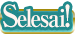
<style>
.page{position:relative;width:75px;height:34px;background:#218a8c}
.page>*{position:absolute;margin:0}
.t1{font:24px "RyuminPro-ExBold";letter-spacing:-0.08em;color:#fff5f0;scale:0.9 1}
.t2{font:30px "RyuminPro-ExBold";letter-spacing:-0.08em;color:#fff5f0;scale:0.9 1}
</style>
<div class="page">
<p class="t1" style="left:3px;top:4px;width:67px;height:24px"><span class="t2">S</span>elesai<span class="t2">!</span></p>
</div>
